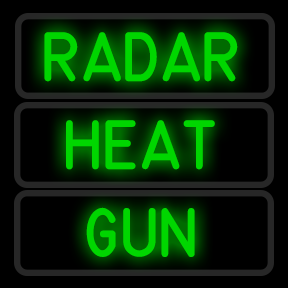
<style>
.page{position:relative;width:288px;height:288px;background:#000000}
.page>*{position:absolute;margin:0}
.t1{font:49px "MS-33558-Regular";color:#00d600;text-transform:uppercase}
</style>
<div class="page">
<p class="t1" style="left:44px;top:32px;width:194px;height:50px">RADAR</p>
<p class="t1" style="left:66px;top:120px;width:149px;height:50px">HEAT</p>
<p class="t1" style="left:86px;top:207px;width:109px;height:50px">GUN</p>
</div>
